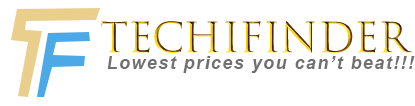
<style>
.page{position:relative;width:415px;height:106px;background:#ffffff}
.page>*{position:absolute;margin:0}
.t1{font:18px/1px "Arial-BoldItalicMT";letter-spacing:0.08em}
.t2{font:40px/16px "TrajanColor-Concept"}
</style>
<div class="page">
<p class="t1" style="left:101px;top:21px;width:314px;height:52px"><span class="t2">TECHIFINDER<br><br></span> Lowest prices you can’t beat!!!</p>
</div>
